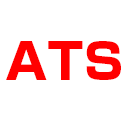
<style>
.page{position:relative;width:128px;height:128px;background:#ffffff}
.page>*{position:absolute;margin:0}
.t1{font:48.6px "ShinGoPro-Heavy";color:#ff0000}
</style>
<div class="page">
<p class="t1" style="left:6px;top:41px;width:115px;height:39px">ATS</p>
</div>
